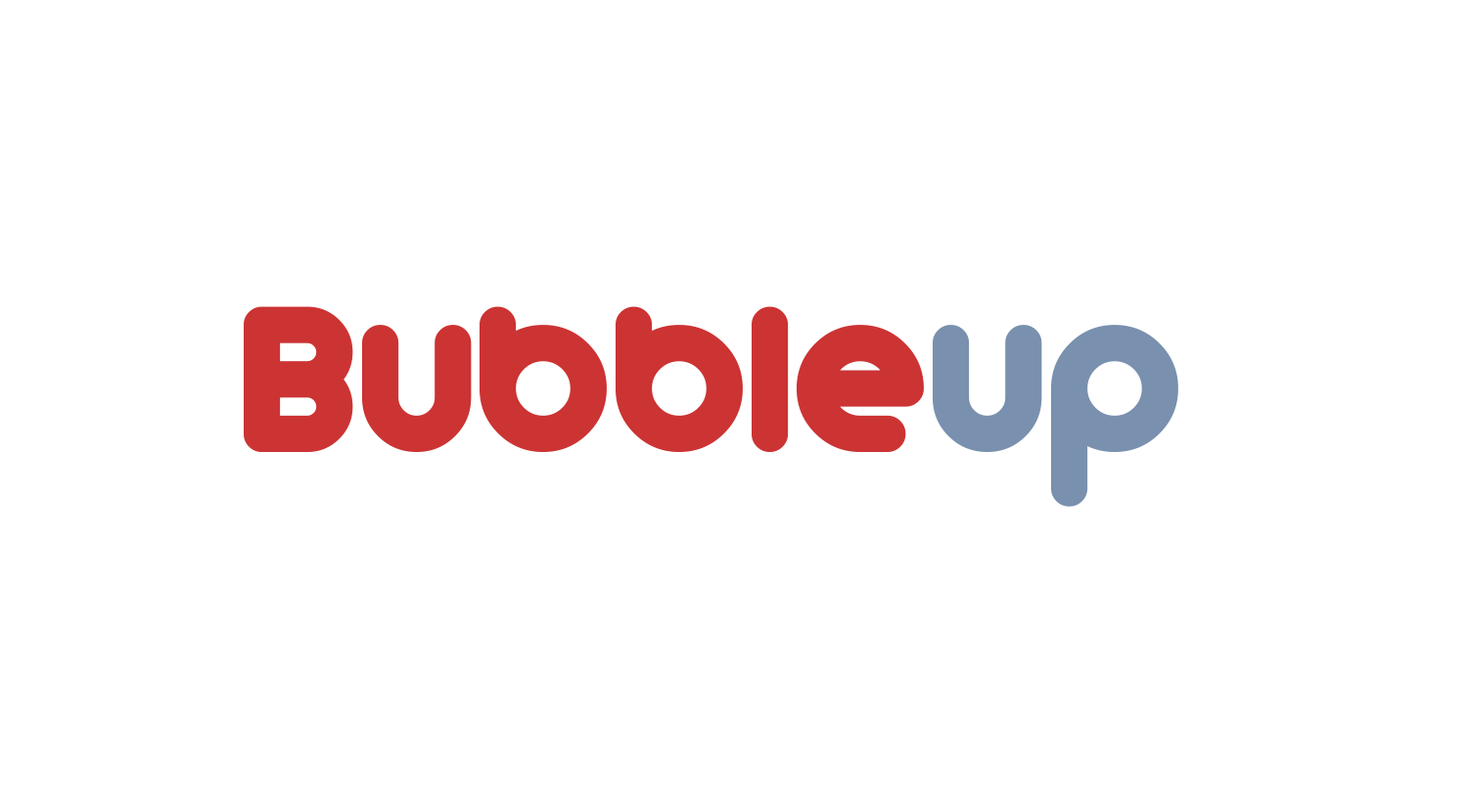
<style>
.page{position:relative;width:1468px;height:812px;background:#ffffff}
.page>*{position:absolute;margin:0}
.t1{font:185.9px "DunkinSans";letter-spacing:-0.05em;color:#cc3333}
.t2{font:185.9px "DunkinSans";letter-spacing:-0.05em;color:#7990ae}
</style>
<div class="page">
<p class="t1" style="left:244px;top:306px;width:934px;height:201px">Bubble<span class="t2">up</span></p>
</div>
